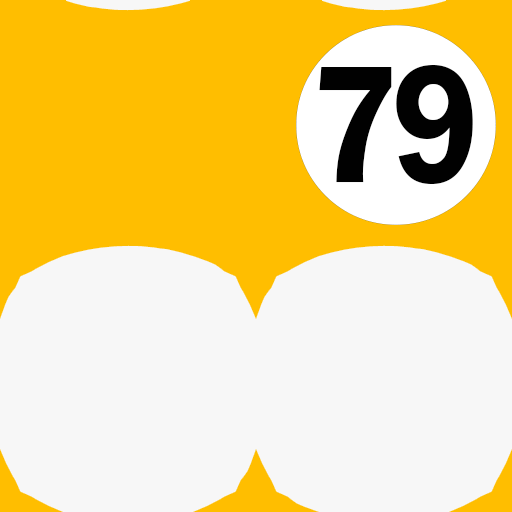
<style>
.page{position:relative;width:512px;height:512px;background:#f7f7f7}
.page>*{position:absolute;margin:0}
.t1{font:172.5px "FranklinGothic-Demi";letter-spacing:-0.05em;color:#010101;scale:0.87 1}
</style>
<div class="page">
<p class="t1" style="left:319px;top:65px;width:154px;height:119px">79</p>
</div>
